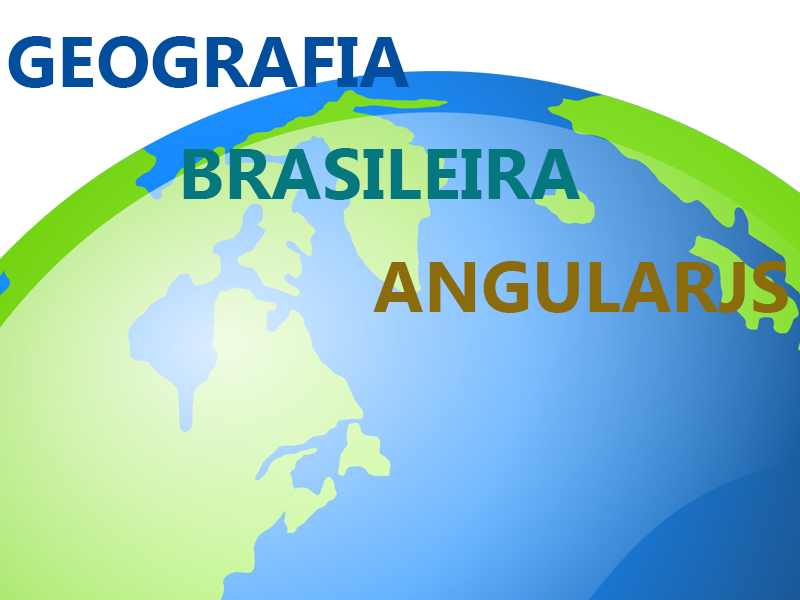
<style>
.page{position:relative;width:800px;height:600px}
.page>*{position:absolute;margin:0}
.t1{font:72px "MicrosoftTaiLe-Bold";color:#014e9e}
.t2{font:72px "MicrosoftTaiLe-Bold";color:#05787f}
.t3{font:72px "MicrosoftTaiLe-Bold";color:#8a6c0c}
</style>
<div class="page">
<p class="t1" style="left:8px;top:36px;width:401px;height:52px">GEOGRAFIA</p>
<p class="t2" style="left:183px;top:148px;width:397px;height:52px">BRASILEIRA</p>
<p class="t3" style="left:373px;top:261px;width:415px;height:52px">ANGULARJS</p>
</div>
